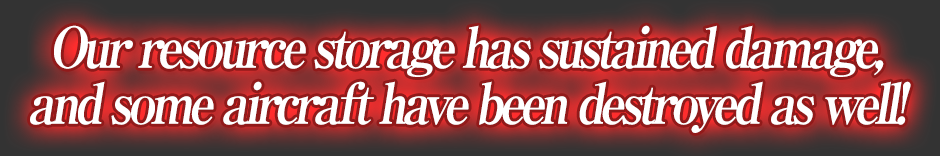
<style>
.page{position:relative;width:940px;height:156px}
.page>*{position:absolute;margin:0}
.t1{font:56px/56px "RyuminPro-ExBold";letter-spacing:-0.1em;color:#ffffff;font-style:italic;scale:0.9 1}
</style>
<div class="page">
<p class="t1" style="left:30px;top:25px;width:881px;height:108px;text-align:center">Our resource storage has sustained damage,<br>and some aircraft have been destroyed as well!</p>
</div>
